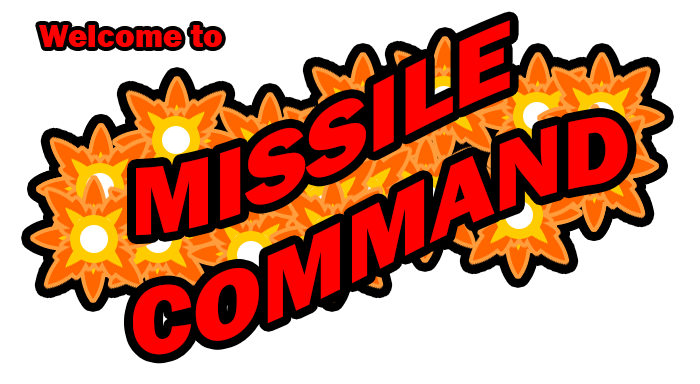
<style>
.page{position:relative;width:700px;height:384px;background:#ffffff}
.page>*{position:absolute;margin:0}
.t1{font:33.3px "FranklinGothic-Heavy";color:#ff0000}
.t2{font:100px "FranklinGothic-Heavy";color:#ff0000}
</style>
<div class="page">
<p class="t1" style="left:39px;top:25px;width:183px;height:22px">Welcome to</p>
<p class="t2" style="left:133px;top:20px;width:495px;height:335px">MISSILE<br>COMMAND</p>
</div>
